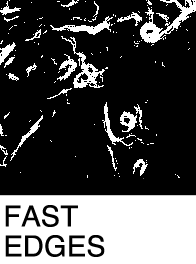
<style>
.page{position:relative;width:196px;height:264px;background:#000000}
.page>*{position:absolute;margin:0}
.t1{font:28.9px/30px "Helvetica";color:#000000}
</style>
<div class="page">
<p class="t1" style="left:5px;top:205px;width:100px;height:52px">FAST<br>EDGES</p>
</div>
